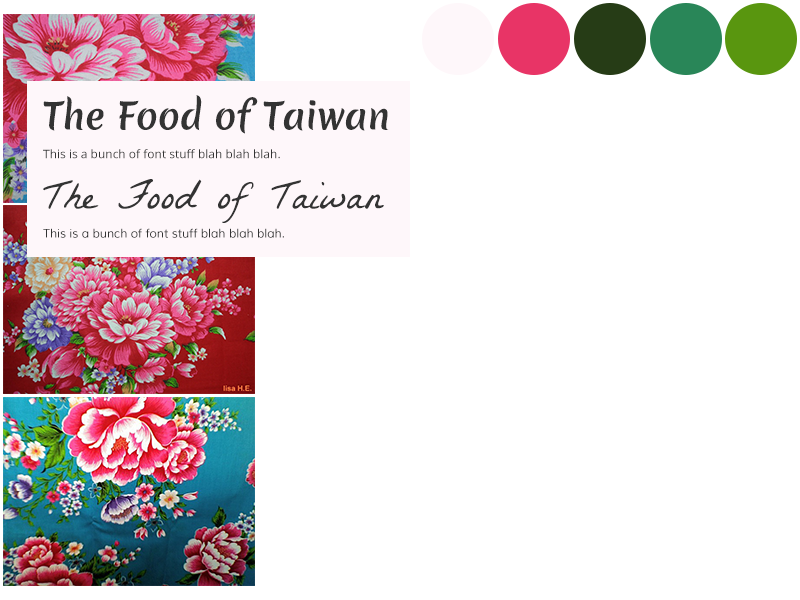
<style>
.page{position:relative;width:800px;height:600px;background:#ffffff}
.page>*{position:absolute;margin:0}
.t1{font:12px "OpenSans";color:#333333}
.t2{font:36px "MeriendaOne-Regular";color:#333333}
.t3{font:42px "LaBelleAurore";color:#333333}
.t4{font:12px "Muli";color:#333333}
</style>
<div class="page">
<p class="t1" style="left:43px;top:95px;width:346px;height:143px"><span class="t2">The Food of Taiwan<br></span><br>This is a bunch of font stuff blah blah blah.<br><span class="t3">The Food of Taiwan<br></span><span class="t4"><br>This is a bunch of font stuff blah blah blah.</span></p>
</div>
